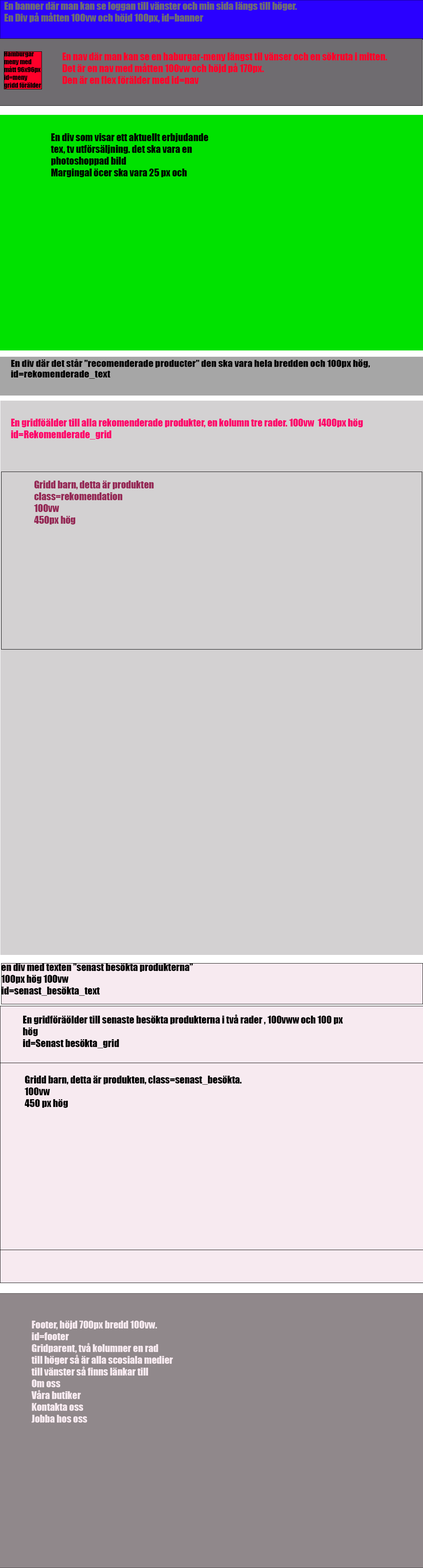
<style>
.page{position:relative;width:423px;height:1568px;background:#d3d1d2}
.page>*{position:absolute;margin:0}
.t1{font:9.8px "Impact";color:#6f6c70}
.t2{font:6.5px "Impact";color:#020202}
.t3{font:9.8px "Impact";color:#ff002a}
.t4{font:9.8px "Impact";color:#000000}
.t5{font:9.8px "Impact";color:#ff006a}
.t6{font:8.8px "Impact";color:#000000;scale:1.13 1}
.t7{font:9.8px "Impact";color:#952956}
.t8{font:9.8px "Impact";color:#f7eaf0}
</style>
<div class="page">
<p class="t1" style="left:4px;top:2px;width:293px;height:21px">En banner där man kan se loggan till vänster och min sida längs till höger.<br>En Div på måtten 100vw och höjd 100px, id=banner</p>
<p class="t2" style="left:4px;top:51px;width:37px;height:38px">Hamburgar meny med mått 96x96px<br>id=meny<br>gridd förälder</p>
<p class="t3" style="left:62px;top:53px;width:326px;height:31px">En nav där man kan se en haburgar-meny längst til vänser och en sökruta i mitten.<br>Det är en nav med måtten 100vw och höjd på 170px. <br>Den är en flex förälder med id=nav</p>
<p class="t4" style="left:51px;top:133px;width:158px;height:44px">En div som visar ett aktuellt erbjudande tex, tv utförsäljning. det ska vara en photoshoppad bild  <br>Margingal öcer ska vara 25 px och <span class="t5">själva diven ska få måtten 100vw och 600px höd<br>Id=erbjudande</span></p>
<p class="t6" style="left:11px;top:359px;width:359px;height:20px">En div där det står ”recomenderade producter” den ska vara hela bredden och 100px hög, id=rekomenderade_text</p>
<p class="t5" style="left:11px;top:419px;width:352px;height:20px">En gridföälder till alla rekomenderade produkter, en kolumn tre rader. 100vw  1400px hög<br>id=Rekomenderade_grid</p>
<p class="t7" style="left:34px;top:481px;width:120px;height:43px">Gridd barn, detta är produkten <br>class=rekomendation<br>100vw<br>450px hög</p>
<p class="t4" style="left:1px;top:963px;width:192px;height:33px">en div med texten ”senast besökta produkterna”<br>100px hög 100vw<br>id=senast_besökta_text</p>
<p class="t4" style="left:23px;top:1014px;width:320px;height:34px">En gridföräölder till senaste besökta produkterna i två rader , 100vww och 100 px hög<br>id=Senast besökta_grid</p>
<p class="t4" style="left:25px;top:1076px;width:217px;height:32px">Gridd barn, detta är produkten, class=senast_besökta.<br>100vw<br>450 px hög</p>
<p class="t8" style="left:31px;top:1321px;width:142px;height:102px">Footer, höjd 700px bredd 100vw.<br>id=footer<br>Gridparent, två kolumner en rad<br>till höger så är alla scosiala medier<br>till vänster så finns länkar till <br>Om oss<br>Våra butiker<br>Kontakta oss<br>Jobba hos oss</p>
</div>
